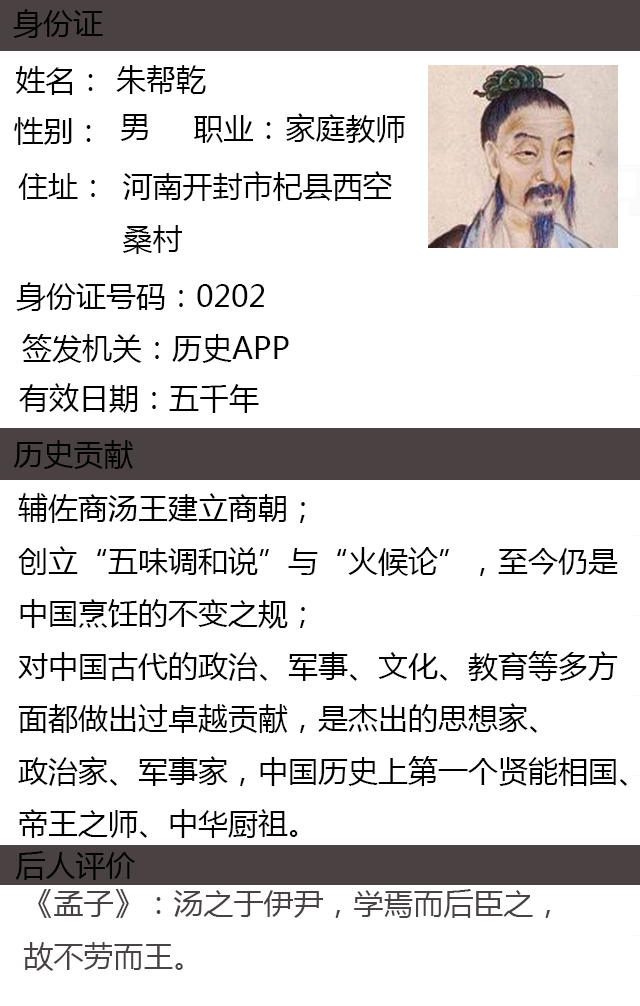
<style>
.page{position:relative;width:640px;height:1006px;background:#ffffff}
.page>*{position:absolute;margin:0}
.t1{font:30px "MicrosoftYaHei";color:#000000}
.t2{font:30px "MicrosoftYaHei";color:#494242}
</style>
<div class="page">
<p class="t1" style="left:13px;top:9px;width:90px;height:29px">身份证</p>
<p class="t1" style="left:116px;top:65px;width:90px;height:29px">朱帮乾</p>
<p class="t1" style="left:16px;top:66px;width:77px;height:29px">姓名：</p>
<p class="t1" style="left:286px;top:113px;width:119px;height:30px">家庭教师</p>
<p class="t1" style="left:14px;top:117px;width:77px;height:28px">性别：</p>
<p class="t1" style="left:120px;top:114px;width:28px;height:27px">男</p>
<p class="t1" style="left:194px;top:115px;width:77px;height:28px">职业：</p>
<p class="t1" style="left:18px;top:173px;width:77px;height:27px">住址：</p>
<p class="t1" style="left:122px;top:171px;width:270px;height:83px">河南开封市杞县西空<br>桑村</p>
<p class="t1" style="left:16px;top:282px;width:248px;height:29px">身份证号码：0202</p>
<p class="t1" style="left:22px;top:334px;width:267px;height:29px">签发机关：历史APP</p>
<p class="t1" style="left:19px;top:383px;width:240px;height:30px">有效日期：五千年</p>
<p class="t1" style="left:13px;top:440px;width:120px;height:29px">历史贡献</p>
<p class="t1" style="left:18px;top:493px;width:609px;height:345px">辅佐商汤王建立商朝；<br>创立“五味调和说”与“火候论”，至今仍是<br>中国烹饪的不变之规；<br>对中国古代的政治、军事、文化、教育等多方<br>面都做出过卓越贡献，是杰出的思想家、<br>政治家、军事家，中国历史上第一个贤能相国、<br>帝王之师、中华厨祖。</p>
<p class="t1" style="left:15px;top:851px;width:120px;height:29px">后人评价</p>
<p class="t2" style="left:23px;top:889px;width:527px;height:82px">《孟子》：汤之于伊尹，学焉而后臣之，<br>故不劳而王。</p>
</div>
